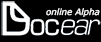
<style>
.page{position:relative;width:101px;height:42px;background:#000000}
.page>*{position:absolute;margin:0}
.t1{font:8.6px "Verdana-Italic";color:#ffffff}
</style>
<div class="page">
<p class="t1" style="left:46px;top:8px;width:54px;height:9px">online Alpha</p>
</div>
